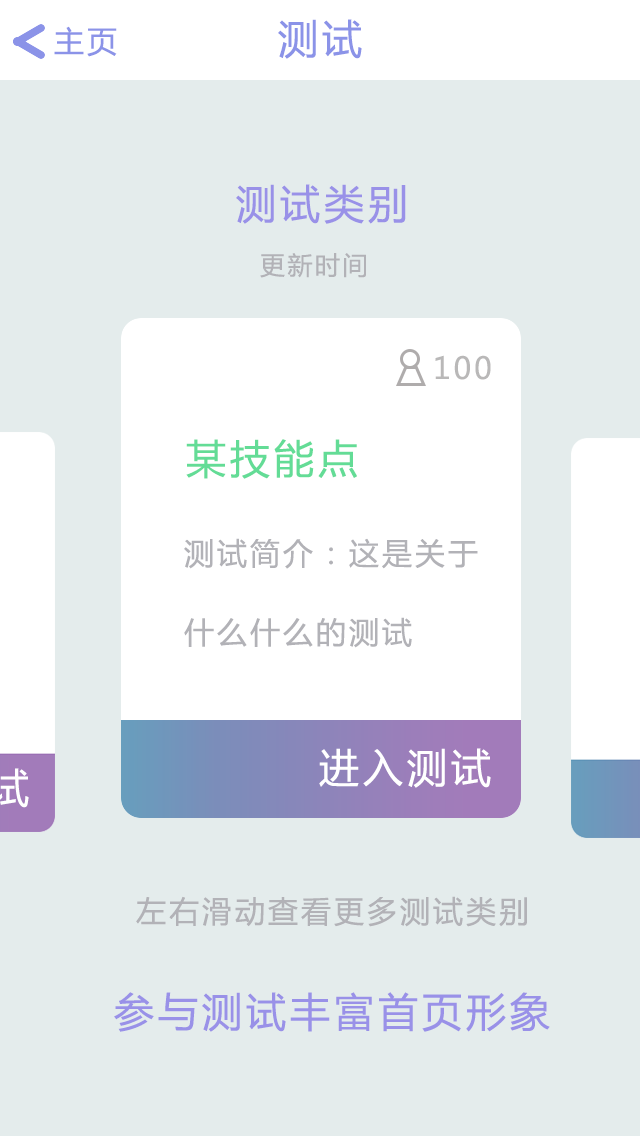
<style>
.page{position:relative;width:640px;height:1136px;background:#e4ecec}
.page>*{position:absolute;margin:0}
.t1{font:30px "MicrosoftYaHei";letter-spacing:0.1em;color:#8b93e8}
.t2{font:40px "MicrosoftYaHei";letter-spacing:0.1em;color:#8b93e8}
.t3{font:40px "MicrosoftYaHei";letter-spacing:0.1em;color:#9991e8}
.t4{font:25px "MicrosoftYaHei";letter-spacing:0.1em;color:#b2b2b7}
.t5{font:30px "MicrosoftYaHei";letter-spacing:0.1em;color:#b9b8b8}
.t6{font:40px "MicrosoftYaHei";letter-spacing:0.1em;color:#63dc96}
.t7{font:30px "MicrosoftYaHei";letter-spacing:0.1em;color:#b2b2b7}
.t8{font:40px "MicrosoftYaHei";letter-spacing:0.1em;color:#ffffff}
</style>
<div class="page">
<p class="t1" style="left:54px;top:26px;width:63px;height:31px">主页</p>
<p class="t2" style="left:278px;top:19px;width:84px;height:40px">测试</p>
<p class="t3" style="left:236px;top:184px;width:170px;height:40px">测试类别</p>
<p class="t4" style="left:260px;top:253px;width:106px;height:25px">更新时间</p>
<p class="t5" style="left:435px;top:355px;width:56px;height:25px">100</p>
<p class="t6" style="left:186px;top:439px;width:171px;height:40px">某技能点</p>
<p class="t7" style="left:184px;top:538px;width:294px;height:31px">测试简介：这是关于</p>
<p class="t7" style="left:184px;top:617px;width:228px;height:31px">什么什么的测试</p>
<p class="t8" style="left:319px;top:748px;width:172px;height:40px">进入测试</p>
<p class="t7" style="left:136px;top:896px;width:391px;height:31px">左右滑动查看更多测试类别</p>
<p class="t3" style="left:114px;top:992px;width:436px;height:40px">参与测试丰富首页形象</p>
</div>
